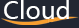
<style>
.page{position:relative;width:79px;height:28px;background:#222632}
.page>*{position:absolute;margin:0}
.t1{font:24px "MicrosoftYaHei";color:#ffffff}
</style>
<div class="page">
<p class="t1" style="left:4px;top:0px;width:65px;height:19px">Cloud</p>
</div>
